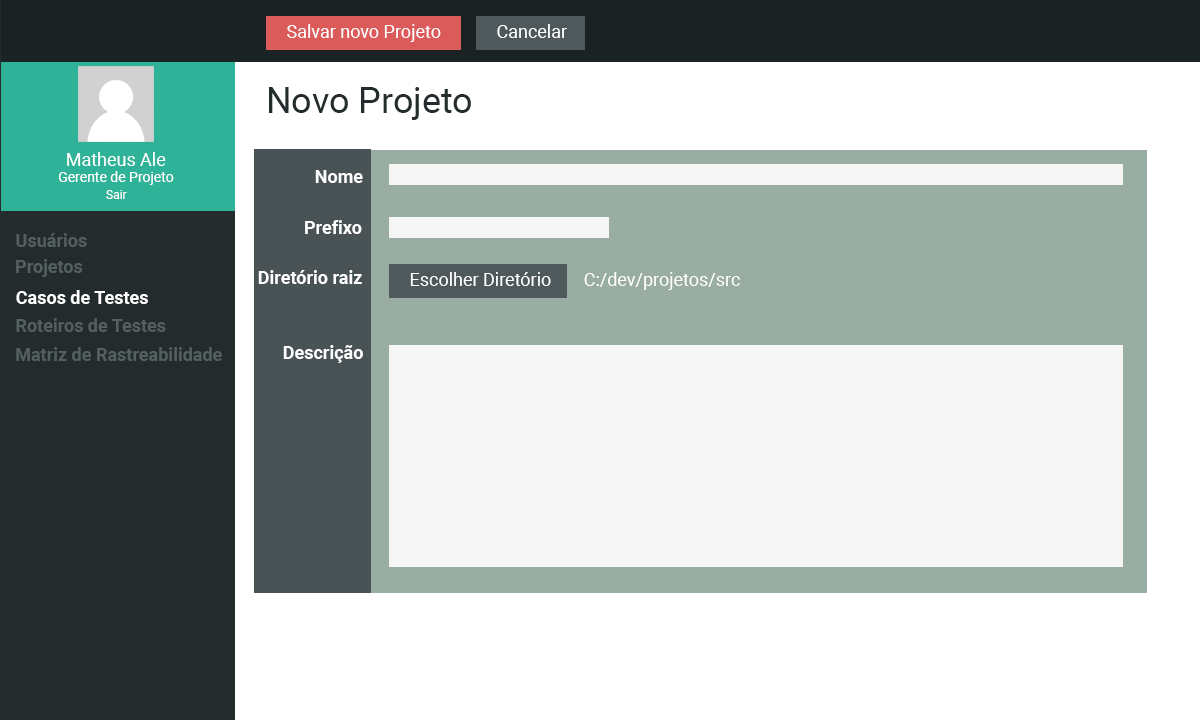
<style>
.page{position:relative;width:1200px;height:720px;background:#ffffff}
.page>*{position:absolute;margin:0}
.t1{font:18px "Roboto-Regular";color:#ffffff}
.t2{font:36px "Roboto-Regular";color:#242c2e}
.t3{font:18.1px "Roboto-Regular";color:#ffffff}
.t4{font:14.1px "Roboto-Regular";color:#ffffff}
.t5{font:17.9px "Roboto-Bold";color:#fefefe}
.t6{font:12.1px "Roboto-Regular";color:#ffffff}
.t7{font:18px "Roboto-Bold";color:#ffffff}
.t8{font:18px "Roboto-Bold";color:#545f61}
</style>
<div class="page">
<p class="t1" style="left:287px;top:24px;width:154px;height:18px">Salvar novo Projeto</p>
<p class="t1" style="left:497px;top:24px;width:70px;height:14px">Cancelar</p>
<p class="t2" style="left:269px;top:87px;width:202px;height:33px">Novo Projeto</p>
<p class="t3" style="left:67px;top:152px;width:99px;height:14px">Matheus Ale</p>
<p class="t4" style="left:59px;top:171px;width:115px;height:14px">Gerente de Projeto</p>
<p class="t5" style="left:315px;top:170px;width:48px;height:13px">Nome</p>
<p class="t6" style="left:106px;top:190px;width:21px;height:9px">Sair</p>
<p class="t7" style="left:305px;top:220px;width:57px;height:14px">Prefixo</p>
<p class="t8" style="left:16px;top:233px;width:71px;height:14px">Usuários</p>
<p class="t8" style="left:16px;top:259px;width:67px;height:18px">Projetos</p>
<p class="t5" style="left:258px;top:270px;width:104px;height:14px">Diretório raiz</p>
<p class="t1" style="left:410px;top:272px;width:141px;height:14px">Escolher Diretório</p>
<p class="t1" style="left:584px;top:272px;width:156px;height:18px">C:/dev/projetos/src</p>
<p class="t7" style="left:16px;top:290px;width:132px;height:14px">Casos de Testes</p>
<p class="t8" style="left:16px;top:318px;width:150px;height:14px">Roteiros de Testes</p>
<p class="t8" style="left:16px;top:347px;width:206px;height:14px">Matriz de Rastreabilidade</p>
<p class="t5" style="left:283px;top:345px;width:80px;height:18px">Descrição</p>
</div>
